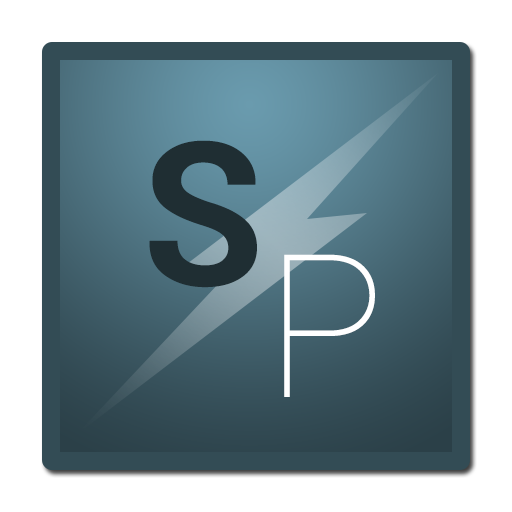
<style>
.page{position:relative;width:512px;height:512px;background:#ffffff}
.page>*{position:absolute;margin:0}
.t1{font:200px "Roboto-Bold";color:#1f2e33}
.t2{font:200px "Roboto-Thin";color:#ffffff}
</style>
<div class="page">
<p class="t1" style="left:149px;top:140px;width:108px;height:148px">S</p>
<p class="t2" style="left:284px;top:254px;width:91px;height:143px">P</p>
</div>
